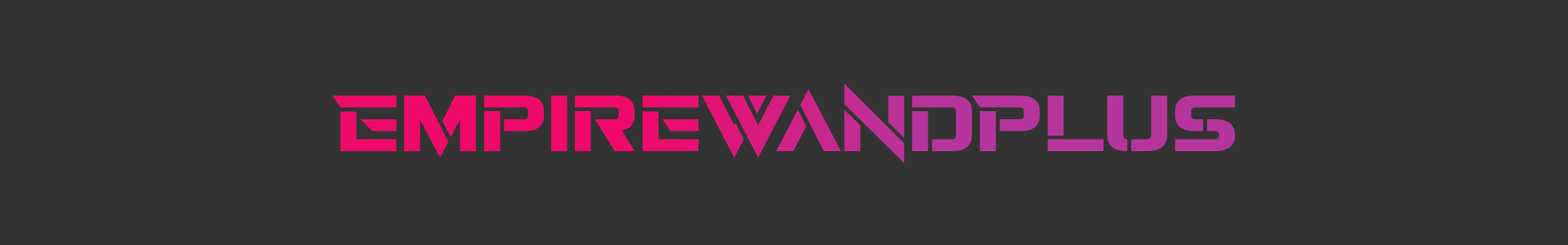
<style>
.page{position:relative;width:1568px;height:245px;background:#333333}
.page>*{position:absolute;margin:0}
.t1{font:81.7px "Revamped"}
</style>
<div class="page">
<p class="t1" style="left:332px;top:83px;width:904px;height:80px">EmpireWandPlus</p>
</div>
